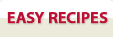
<style>
.page{position:relative;width:113px;height:37px;background:#ffffff}
.page>*{position:absolute;margin:0}
.t1{font:16px "MyriadPro-Semibold";color:#be0f34;text-transform:uppercase;font-weight:bold}
</style>
<div class="page">
<p class="t1" style="left:7px;top:12px;width:101px;height:12px">easy recipes</p>
</div>
